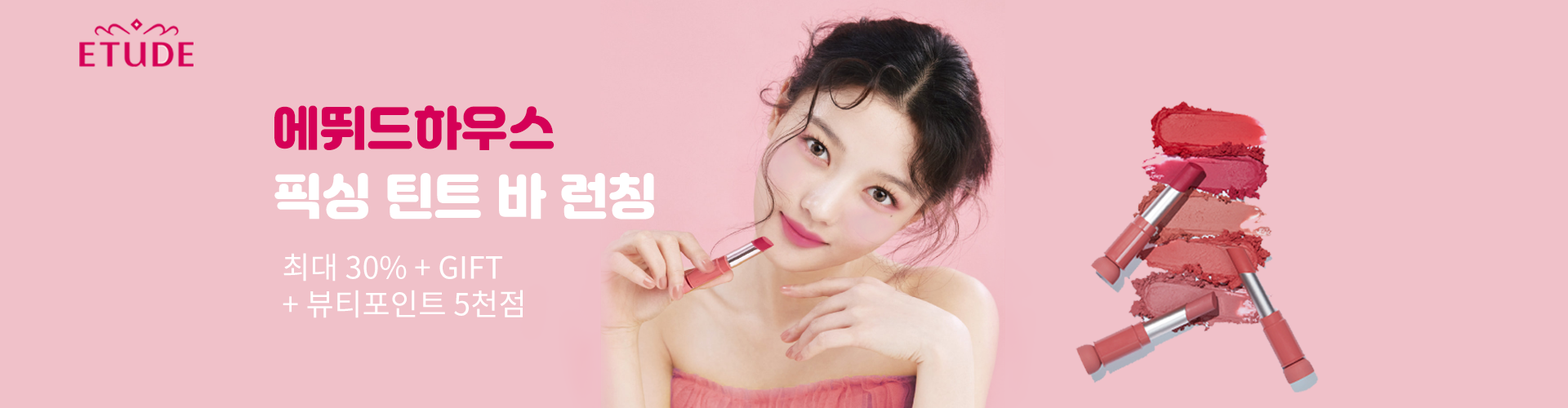
<style>
.page{position:relative;width:1568px;height:408px;background:#f0c1c9}
.page>*{position:absolute;margin:0}
.t1{font:47.3px "Jalnan";color:#d50057}
.t2{font:49px "Jalnan";color:#ffffff}
.t3{font:30.6px "NotoSansKR-Regular";color:#ffffff}
</style>
<div class="page">
<p class="t1" style="left:274px;top:105px;width:281px;height:45px">에뛰드하우스</p>
<p class="t2" style="left:274px;top:172px;width:380px;height:48px">픽싱 틴트 바 런칭</p>
<p class="t3" style="left:283px;top:253px;width:240px;height:65px">최대 30% + GIFT<br>+ 뷰티포인트 5천점</p>
</div>
